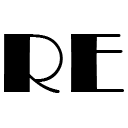
<style>
.page{position:relative;width:128px;height:128px;background:#ffffff}
.page>*{position:absolute;margin:0}
.t1{font:87.5px "Broadway";color:#000000}
</style>
<div class="page">
<p class="t1" style="left:4px;top:34px;width:120px;height:59px">RE</p>
</div>
